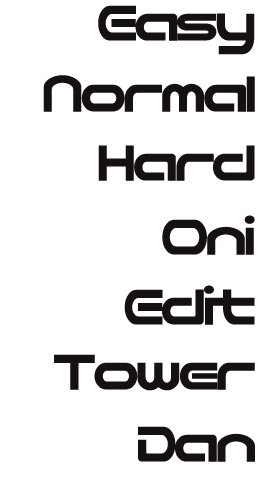
<style>
.page{position:relative;width:260px;height:490px;background:#ffffff}
.page>*{position:absolute;margin:0}
.t1{font:60px "NicoKaku";letter-spacing:-0.1em;color:#151013}
</style>
<div class="page">
<p class="t1" style="left:98px;top:5px;width:157px;height:50px">Easy</p>
<p class="t1" style="left:43px;top:75px;width:212px;height:37px">Normal</p>
<p class="t1" style="left:98px;top:145px;width:157px;height:36px">Hard</p>
<p class="t1" style="left:162px;top:215px;width:93px;height:40px">Oni</p>
<p class="t1" style="left:124px;top:285px;width:131px;height:40px">Edit</p>
<p class="t1" style="left:54px;top:354px;width:201px;height:37px">Tower</p>
<p class="t1" style="left:138px;top:426px;width:117px;height:36px">Dan</p>
</div>
